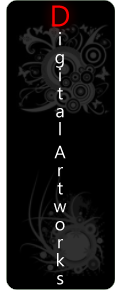
<style>
.page{position:relative;width:120px;height:290px;background:#000000}
.page>*{position:absolute;margin:0}
.t1{font:30px "SegoeUI";color:#ff0000}
.t2{font:18px "SegoeUI";color:#ffffff}
</style>
<div class="page">
<p class="t1" style="left:52px;top:5px;width:17px;height:22px">D</p>
<p class="t2" style="left:53px;top:32px;width:14px;height:253px">igital Artworks</p>
</div>
